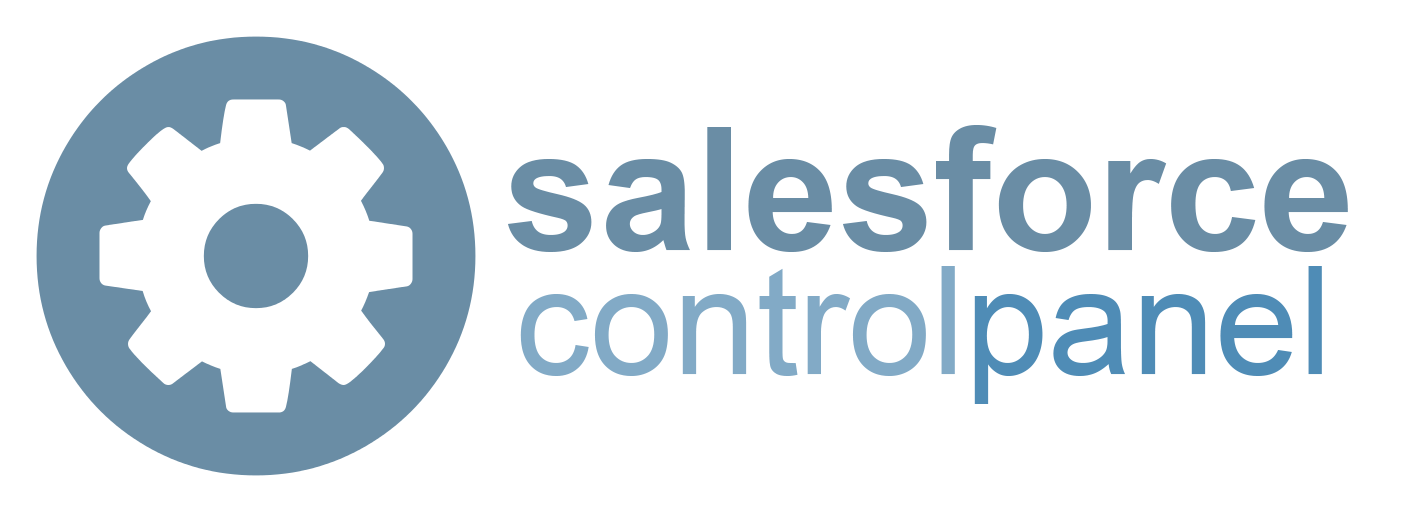
<style>
.page{position:relative;width:1406px;height:512px;background:#ffffff}
.page>*{position:absolute;margin:0}
.t1{font:172px "Arial-BoldMT";color:#6a8da5}
.t2{font:150px "ArialMT";color:#82aac6}
.t3{font:150px "ArialMT";color:#4f8cb6}
</style>
<div class="page">
<p class="t1" style="left:507px;top:125px;width:841px;height:127px">salesforce</p>
<p class="t2" style="left:520px;top:266px;width:802px;height:138px">control<span class="t3">panel</span></p>
</div>
